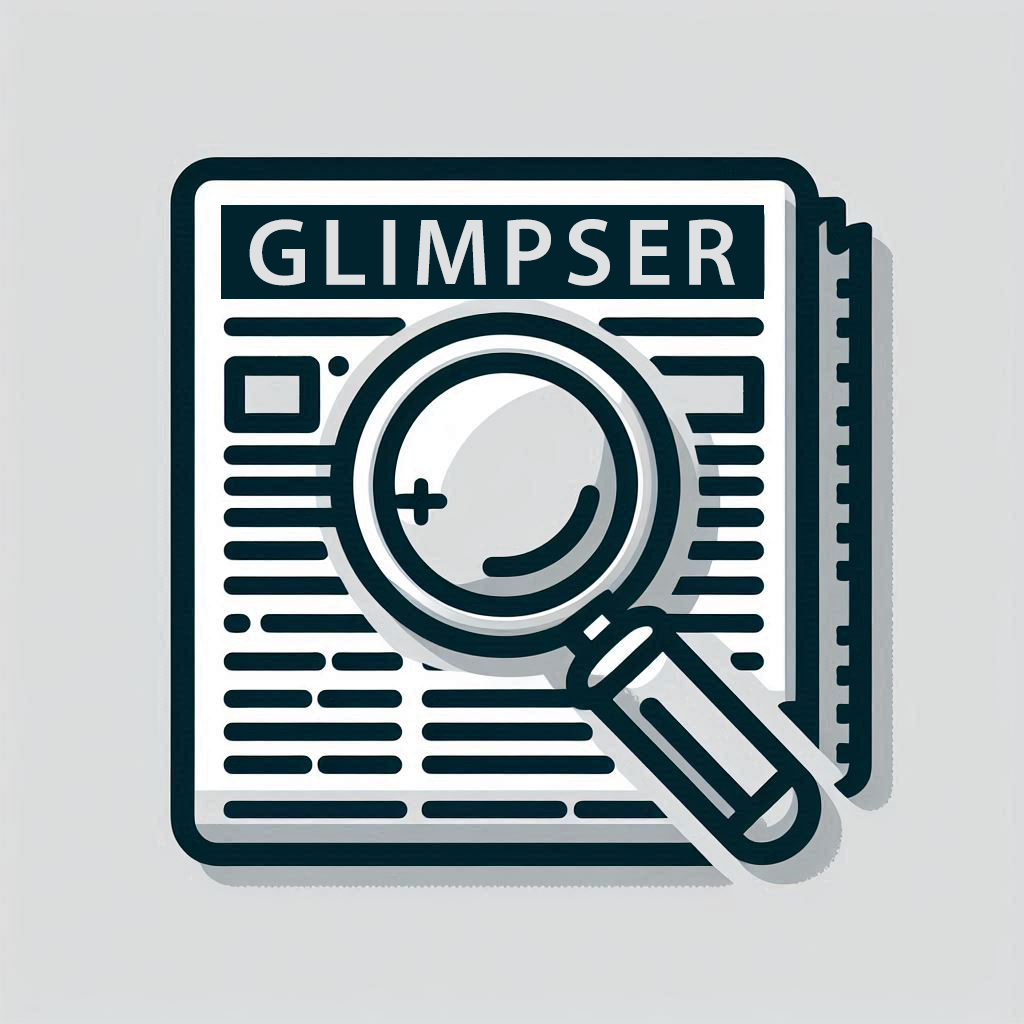
<style>
.page{position:relative;width:1024px;height:1024px;background:#dbdddc}
.page>*{position:absolute;margin:0}
.t1{font:96px "MyriadConceptRoman-Semibold";letter-spacing:0.1em;color:#dfe0e1}
</style>
<div class="page">
<p class="t1" style="left:249px;top:219px;width:486px;height:67px">GLIMPSER</p>
</div>
